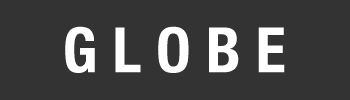
<style>
.page{position:relative;width:350px;height:100px;background:#333333}
.page>*{position:absolute;margin:0}
.t1{font:62.5px "HelveticaNeue-CondensedBold";color:#ffffff}
</style>
<div class="page">
<p class="t1" style="left:65px;top:26px;width:220px;height:47px">G L O B E</p>
</div>
